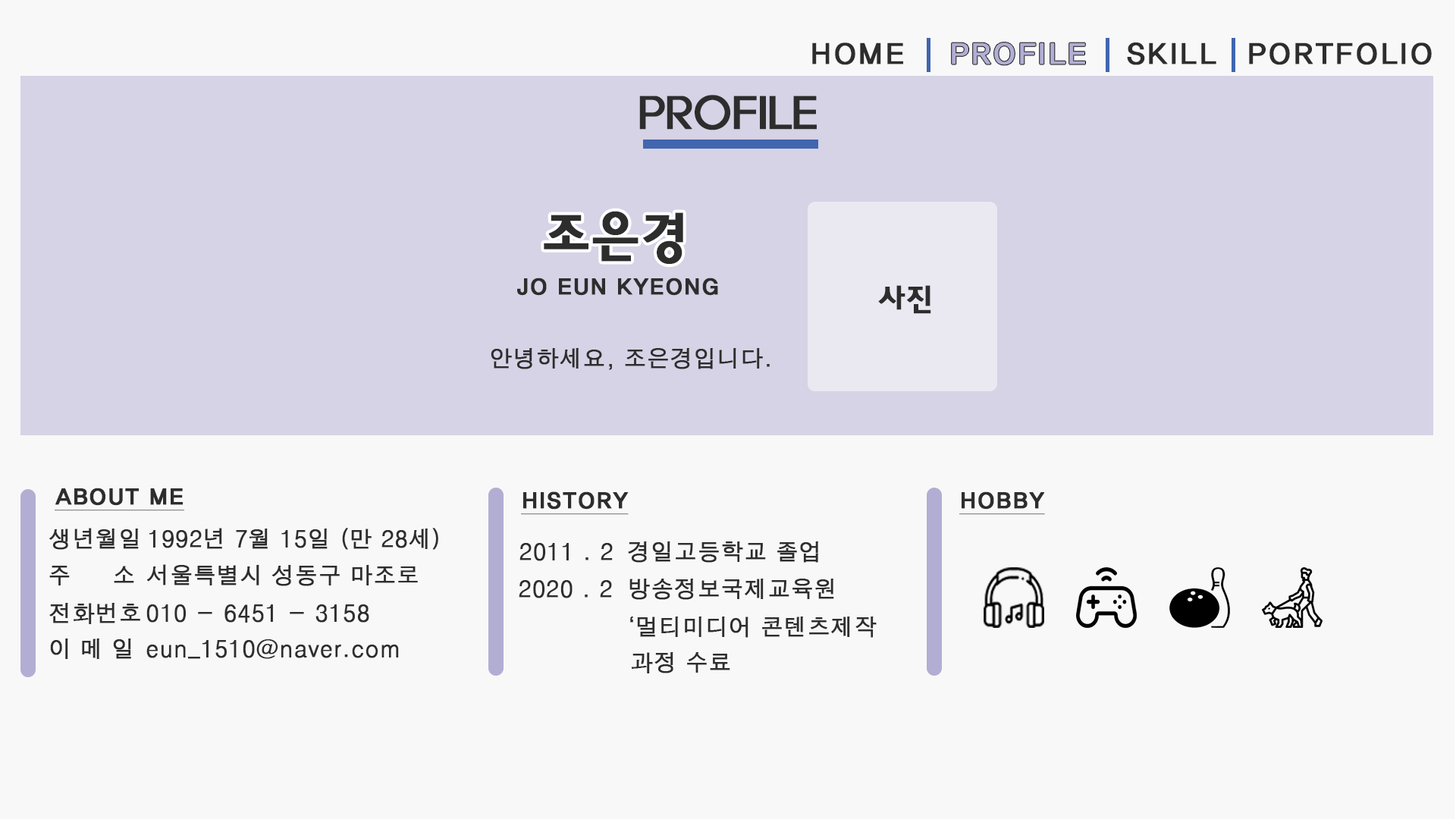
<style>
.page{position:relative;width:1456px;height:819px;background:#f8f8f8}
.page>*{position:absolute;margin:0}
.t1{font:30.3px "HaanYGodic23";color:#2d2d2d;font-weight:bold}
.t2{font:45.5px "HaanYHeadL";color:#2d2d2d;font-weight:bold}
.t3{font:53.1px "HaanYGodic24";color:#2d2d2d;font-weight:bold}
.t4{font:22.7px "HaanYGodic24";color:#2d2d2d;font-weight:bold}
.t5{font:30.3px "HaanYGodic24";color:#2d2d2d;font-weight:bold}
.t6{font:22.7px "H2gtrM";color:#2d2d2d;font-weight:bold}
.t7{font:22.7px "HaanYGodic24";color:#2d2d2d;font-weight:bold;text-decoration:underline}
</style>
<div class="page">
<p class="t1" style="left:812px;top:42px;width:91px;height:23px">HOME</p>
<p class="t1" style="left:1127px;top:42px;width:89px;height:23px">SKILL</p>
<p class="t1" style="left:1249px;top:42px;width:183px;height:23px">PORTFOLIO</p>
<p class="t2" style="left:639px;top:95px;width:178px;height:35px">PROFILE</p>
<p class="t3" style="left:544px;top:211px;width:139px;height:53px">조은경</p>
<p class="t4" style="left:517px;top:278px;width:201px;height:18px">JO EUN KYEONG</p>
<p class="t5" style="left:878px;top:285px;width:53px;height:29px">사진</p>
<p class="t6" style="left:491px;top:348px;width:279px;height:22px">안녕하세요, 조은경입니다.</p>
<p class="t7" style="left:55px;top:488px;width:129px;height:23px">ABOUT ME</p>
<p class="t7" style="left:521px;top:491px;width:108px;height:24px">HISTORY</p>
<p class="t7" style="left:959px;top:491px;width:86px;height:24px">HOBBY</p>
<p class="t6" style="left:49px;top:528px;width:90px;height:22px">생년월일</p>
<p class="t6" style="left:149px;top:528px;width:289px;height:22px">1992년 7월 15일 (만 28세)</p>
<p class="t6" style="left:519px;top:543px;width:94px;height:18px">2011 . 2</p>
<p class="t6" style="left:628px;top:541px;width:190px;height:22px">경일고등학교 졸업</p>
<p class="t6" style="left:49px;top:566px;width:85px;height:19px">주     소</p>
<p class="t6" style="left:146px;top:564px;width:272px;height:22px">서울특별시 성동구 마조로</p>
<p class="t6" style="left:519px;top:580px;width:93px;height:18px">2020 . 2</p>
<p class="t6" style="left:629px;top:579px;width:205px;height:21px">방송정보국제교육원</p>
<p class="t6" style="left:49px;top:603px;width:91px;height:21px">전화번호</p>
<p class="t6" style="left:146px;top:604px;width:223px;height:19px">010 - 6451 - 3158</p>
<p class="t6" style="left:630px;top:617px;width:247px;height:21px">‘멀티미디어 콘텐츠제작</p>
<p class="t6" style="left:50px;top:639px;width:81px;height:20px">이 메 일</p>
<p class="t6" style="left:146px;top:639px;width:253px;height:20px">eun_1510@naver.com</p>
<p class="t6" style="left:631px;top:652px;width:99px;height:21px">과정 수료</p>
</div>
